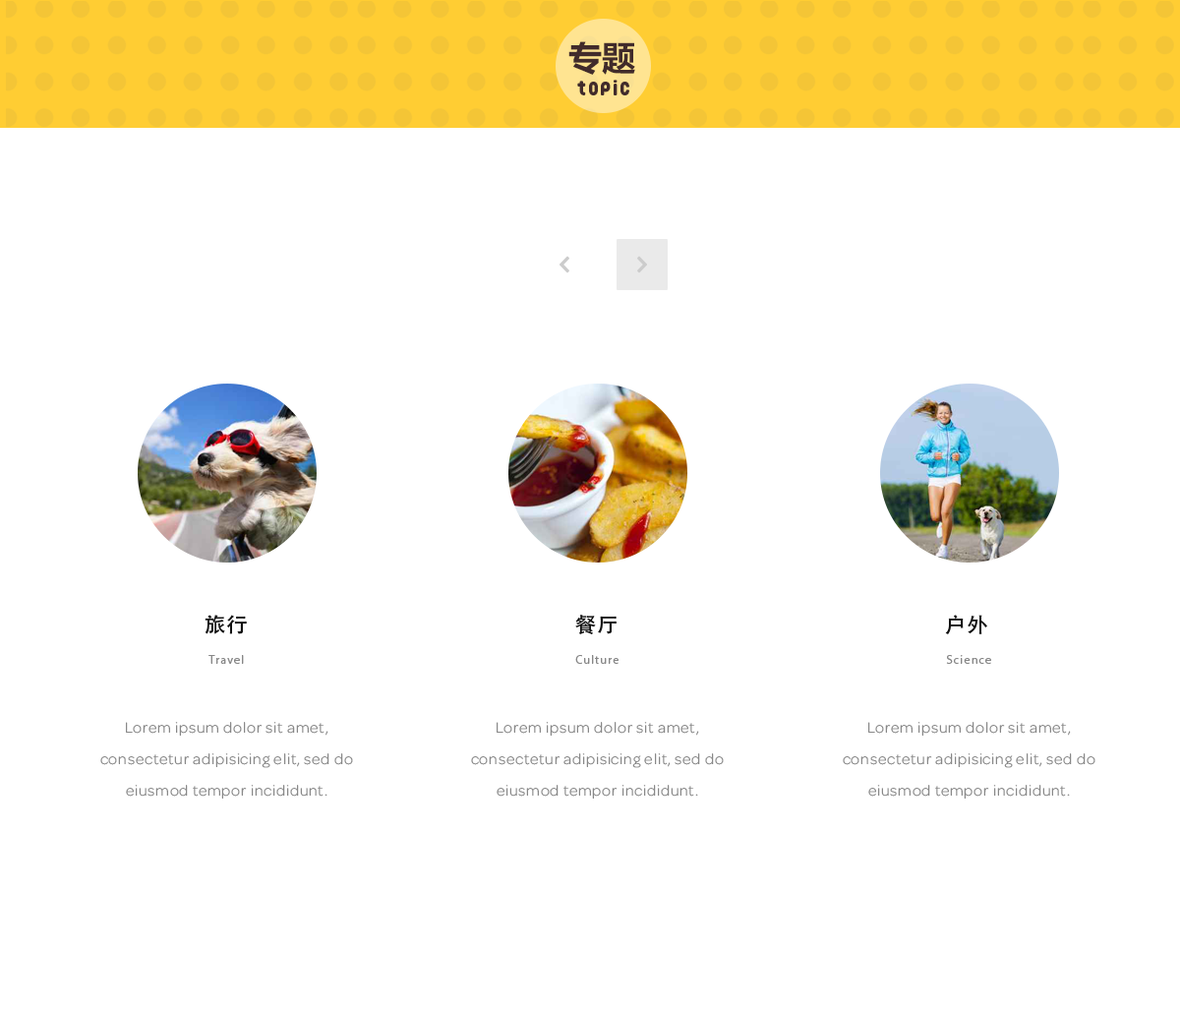
<style>
.page{position:relative;width:1180px;height:1011px;background:#ffffff}
.page>*{position:absolute;margin:0}
.t1{font:33.7px "MicrosoftYaHei-Bold";color:#412b2b;text-transform:uppercase}
.t2{font:19.9px "fontopoFONTOPO-Regular";letter-spacing:0.075em;color:#412b2b}
.t3{font:20.6px "AdobeHeitiStd-Regular";letter-spacing:0.075em;color:#111111;text-transform:uppercase}
.t4{font:11.8px "MyriadPro-Regular";letter-spacing:0.1em;color:#888888}
.t5{font:15.7px/31.5px "Omnes-Light";letter-spacing:0.05em;color:#888888}
</style>
<div class="page">
<p class="t1" style="left:568px;top:41px;width:67px;height:34px">专题</p>
<p class="t2" style="left:577px;top:80px;width:52px;height:15px">topic</p>
<p class="t3" style="left:204px;top:614px;width:43px;height:20px">旅行</p>
<p class="t3" style="left:575px;top:614px;width:41px;height:20px">餐厅</p>
<p class="t3" style="left:945px;top:614px;width:42px;height:20px">户外</p>
<p class="t4" style="left:208px;top:655px;width:36px;height:9px">Travel</p>
<p class="t4" style="left:575px;top:655px;width:43px;height:9px">Culture</p>
<p class="t4" style="left:946px;top:655px;width:45px;height:9px">Science</p>
<p class="t5" style="left:100px;top:722px;width:253px;height:76px;text-align:center">Lorem ipsum dolor sit amet,<br>consectetur adipisicing elit, sed do<br>eiusmod tempor incididunt.</p>
<p class="t5" style="left:471px;top:722px;width:253px;height:76px;text-align:center">Lorem ipsum dolor sit amet,<br>consectetur adipisicing elit, sed do<br>eiusmod tempor incididunt.</p>
<p class="t5" style="left:843px;top:722px;width:252px;height:76px;text-align:center">Lorem ipsum dolor sit amet,<br>consectetur adipisicing elit, sed do<br>eiusmod tempor incididunt.</p>
</div>
